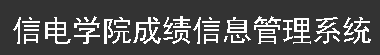
<style>
.page{position:relative;width:380px;height:55px;background:#333333}
.page>*{position:absolute;margin:0}
.t1{font:30px "SimHei";color:#ffffff}
</style>
<div class="page">
<p class="t1" style="left:13px;top:16px;width:358px;height:28px">信电学院成绩信息管理系统</p>
</div>
